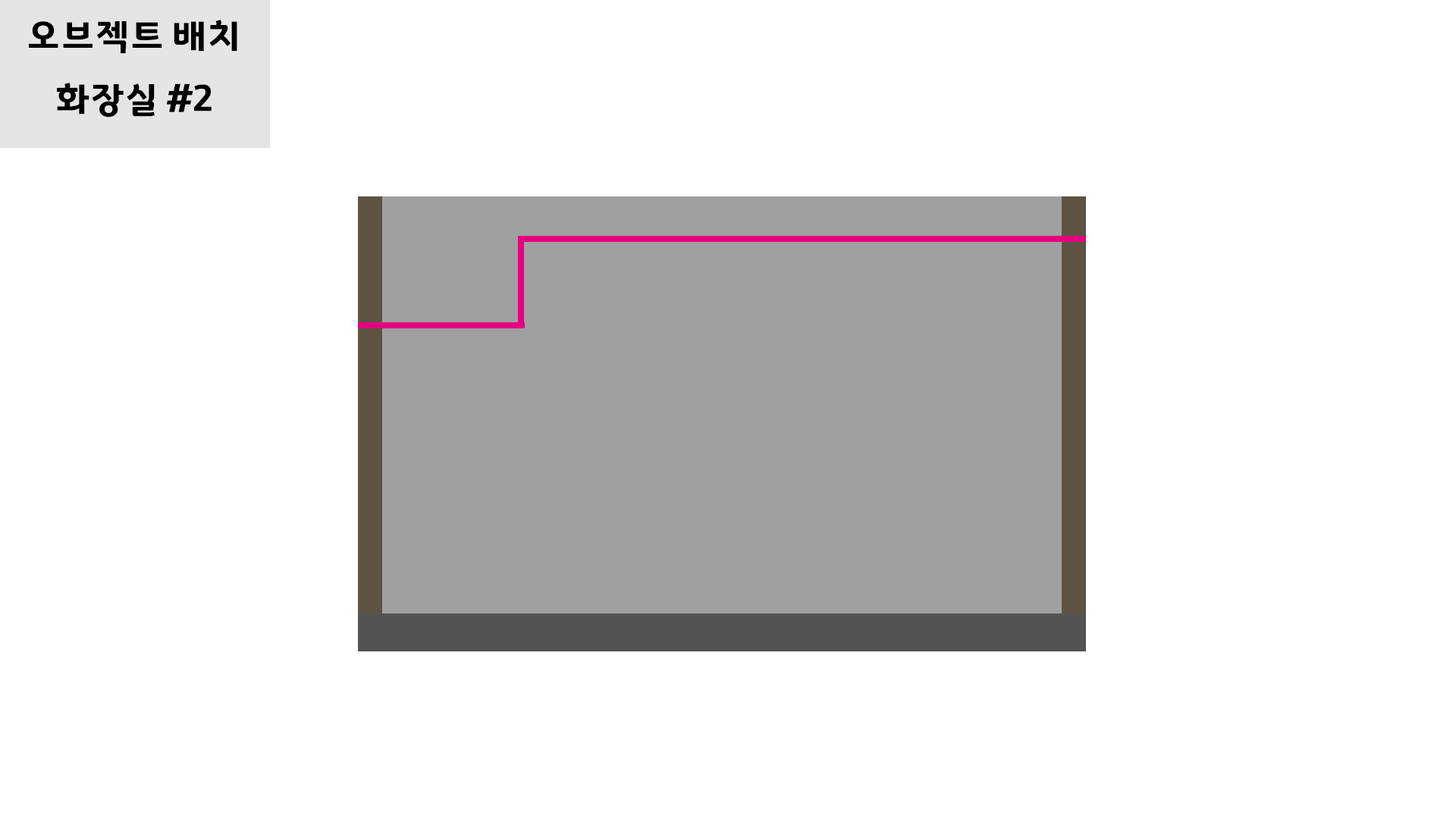
<style>
.page{position:relative;width:1456px;height:819px;background:#ffffff}
.page>*{position:absolute;margin:0}
.t1{font:36.4px "GyeonggiTitleV";letter-spacing:-0.05em;color:#000000}
</style>
<div class="page">
<p class="t1" style="left:29px;top:20px;width:208px;height:34px">오브젝트 배치</p>
<p class="t1" style="left:57px;top:83px;width:155px;height:35px">화장실 #2</p>
</div>
